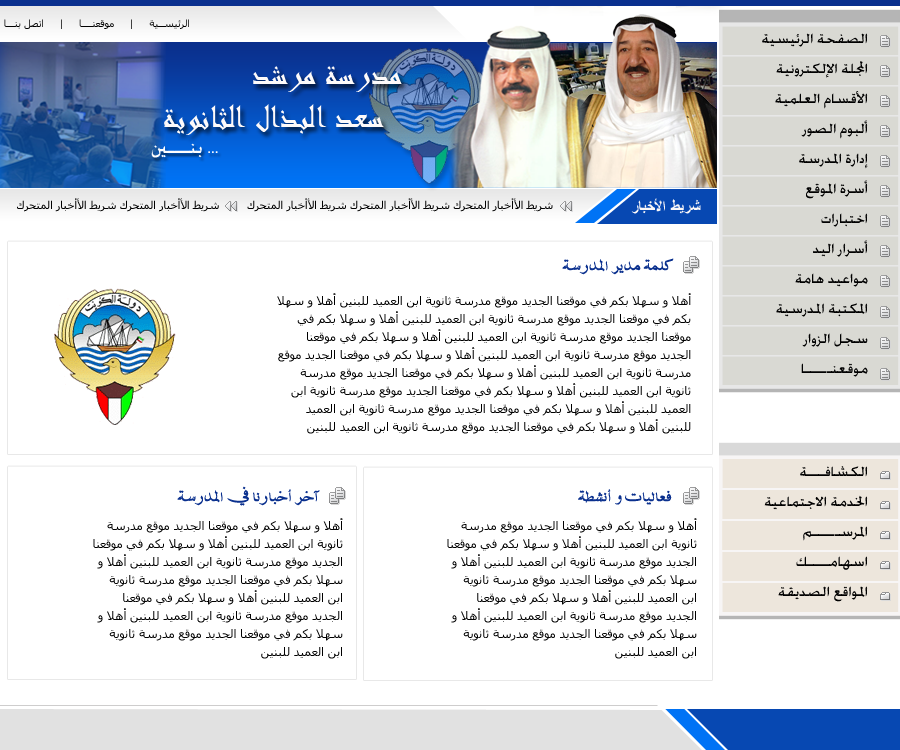
<style>
.page{position:relative;width:900px;height:750px;background:#ffffff}
.page>*{position:absolute;margin:0}
.t1{font:10px "Tahoma";color:#000000}
.t2{font:18px/30px "EngraversMT";color:#000000}
.t3{font:18px/30px "WinSoftPro-Medium";color:#000000}
.t4{font:36px "Andalus";color:#fdfafa}
.t5{font:11px "Tahoma";color:#000000}
.t6{font:16px "ArabicTransparent-Bold";color:#fbf8f8}
.t7{font:16px "MCSNASKOUT";color:#0a308e}
.t8{font:12px/18px "Tahoma";color:#000000}
</style>
<div class="page">
<p class="t1" style="left:4px;top:19px;width:185px;height:10px">الرئيســية     |     موقعنــــا     |     اتصل بنـــا</p>
<p class="t2" style="left:762px;top:33px;width:106px;height:344px">الصفحة الرئيسية<br>المجلة الإلكترونية<br>الأقسام العلمية<br><span class="t3">ألبوم الصور<br></span>إدارة المدرسة<br>أسرة الموقع<br><span class="t3">اختبارات<br></span>أسرار اليد<br><span class="t3">مواعيد هامة<br></span>المكتبة المدرسية<br>سجل الزوار<br>موقعنـــــا</p>
<p class="t4" style="left:164px;top:66px;width:238px;height:69px">مدرسة مرشد <br>   سعد البذال الثانوية</p>
<p class="t5" style="left:17px;top:198px;width:536px;height:14px">شريط الأأخبار المتحرك شريط الأأخبار المتحرك شريط الأأخبار المتحرك        شريط الأأخبار المتحرك شريط الأأخبار المتحرك</p>
<p class="t6" style="left:631px;top:198px;width:70px;height:16px">شريط الأخبار</p>
<p class="t7" style="left:562px;top:258px;width:112px;height:17px">كلمة مدير المدرسة</p>
<p class="t8" style="left:277px;top:293px;width:414px;height:141px">أهلا و سهلا بكم في موقعنا الجديد موقع مدرسة ثانوية ابن العميد للبنين أهلا و سهلا بكم في موقعنا الجديد موقع مدرسة ثانوية ابن العميد للبنين أهلا و سهلا بكم في موقعنا الجديد موقع مدرسة ثانوية ابن العميد للبنين أهلا و سهلا بكم في موقعنا الجديد موقع مدرسة ثانوية ابن العميد للبنين أهلا و سهلا بكم في موقعنا الجديد موقع مدرسة ثانوية ابن العميد للبنين أهلا و سهلا بكم في موقعنا الجديد موقع مدرسة ثانوية ابن العميد للبنين أهلا و سهلا بكم في موقعنا الجديد موقع مدرسة ثانوية ابن العميد للبنين أهلا و سهلا بكم في موقعنا الجديد موقع مدرسة ثانوية ابن العميد للبنين أهلا و سهلا بكم في موقعنا الجديد موقع مدرسة ثانوية ابن العميد للبنين</p>
<p class="t3" style="left:764px;top:466px;width:104px;height:136px">الكشافـــة<br>الخدمة الاجتماعية<br>المرســـــم<br>اسهامــــك<br>المواقع الصديقة</p>
<p class="t7" style="left:177px;top:486px;width:143px;height:20px">آخر أخبارنا في المدرسة</p>
<p class="t7" style="left:578px;top:489px;width:94px;height:16px">فعاليات و أنشطة</p>
<p class="t8" style="left:93px;top:518px;width:250px;height:141px">أهلا و سهلا بكم في موقعنا الجديد موقع مدرسة ثانوية ابن العميد للبنين أهلا و سهلا بكم في موقعنا الجديد موقع مدرسة ثانوية ابن العميد للبنين أهلا و سهلا بكم في موقعنا الجديد موقع مدرسة ثانوية ابن العميد للبنين أهلا و سهلا بكم في موقعنا الجديد موقع مدرسة ثانوية ابن العميد للبنين أهلا و سهلا بكم في موقعنا الجديد موقع مدرسة ثانوية ابن العميد للبنين</p>
<p class="t8" style="left:447px;top:518px;width:250px;height:141px">أهلا و سهلا بكم في موقعنا الجديد موقع مدرسة ثانوية ابن العميد للبنين أهلا و سهلا بكم في موقعنا الجديد موقع مدرسة ثانوية ابن العميد للبنين أهلا و سهلا بكم في موقعنا الجديد موقع مدرسة ثانوية ابن العميد للبنين أهلا و سهلا بكم في موقعنا الجديد موقع مدرسة ثانوية ابن العميد للبنين أهلا و سهلا بكم في موقعنا الجديد موقع مدرسة ثانوية ابن العميد للبنين</p>
</div>
